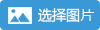
<style>
.page{position:relative;width:100px;height:30px;background:#3998d6}
.page>*{position:absolute;margin:0}
.t1{font:14px "MicrosoftYaHei";color:#ffffff}
</style>
<div class="page">
<p class="t1" style="left:38px;top:8px;width:56px;height:15px">选择图片</p>
</div>
